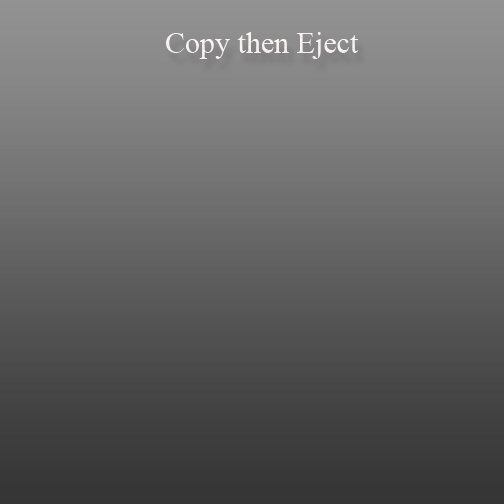
<style>
.page{position:relative;width:504px;height:504px}
.page>*{position:absolute;margin:0}
.t1{font:30px "TimesNewRomanPSMT";color:#fefafa}
</style>
<div class="page">
<p class="t1" style="left:166px;top:32px;width:193px;height:27px">Copy then Eject</p>
<p class="t1" style="left:166px;top:32px;width:193px;height:27px;opacity:0.93">Copy then Eject</p>
</div>
